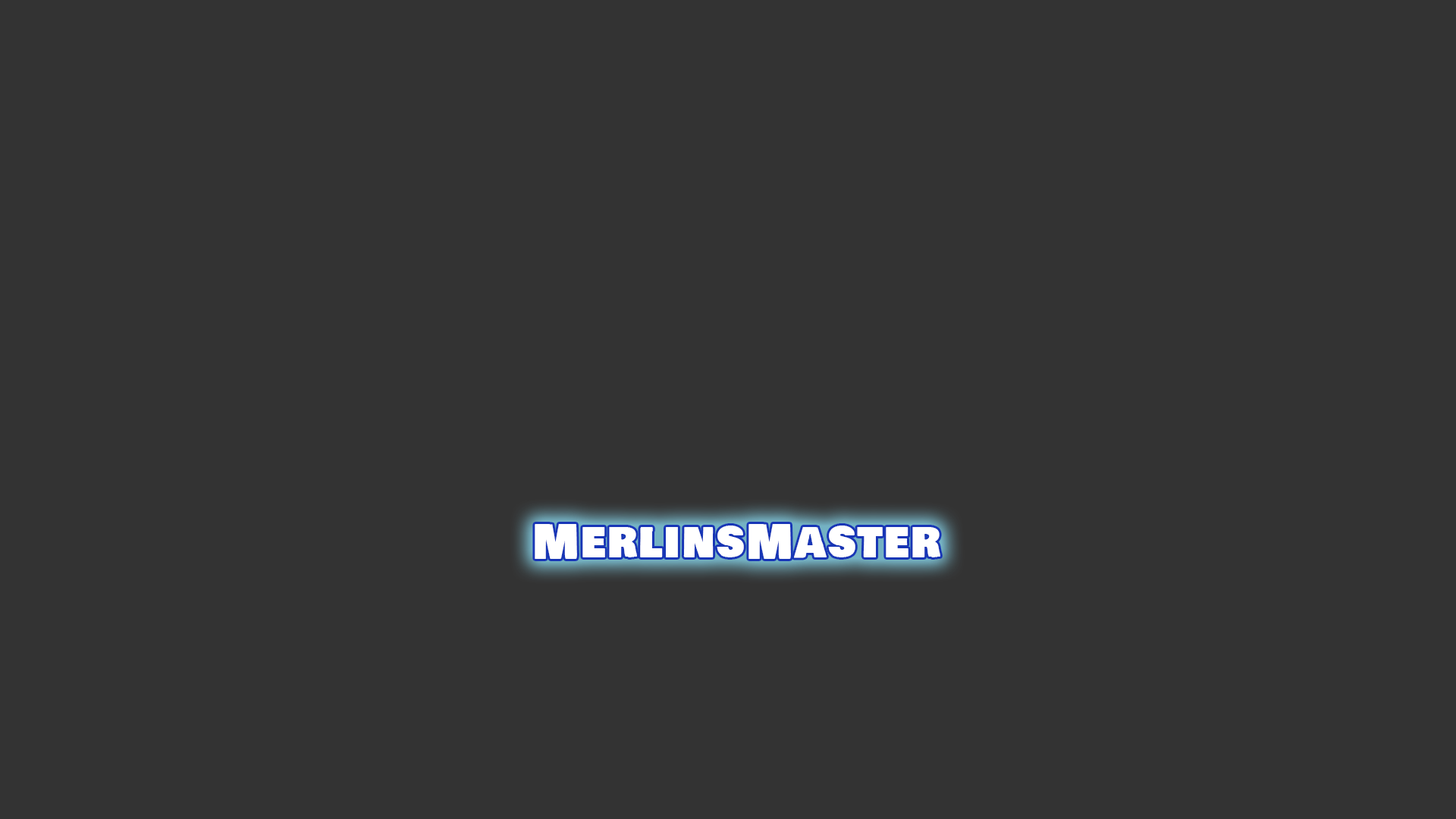
<style>
.page{position:relative;width:1456px;height:819px;background:#333333}
.page>*{position:absolute;margin:0}
.t1{font:46.1px "BowlbyOneSC-Regular";letter-spacing:0.04em;color:#ffffff;scale:0.94 1}
</style>
<div class="page">
<p class="t1" style="left:535px;top:524px;width:405px;height:35px">MerlinsMaster</p>
</div>
